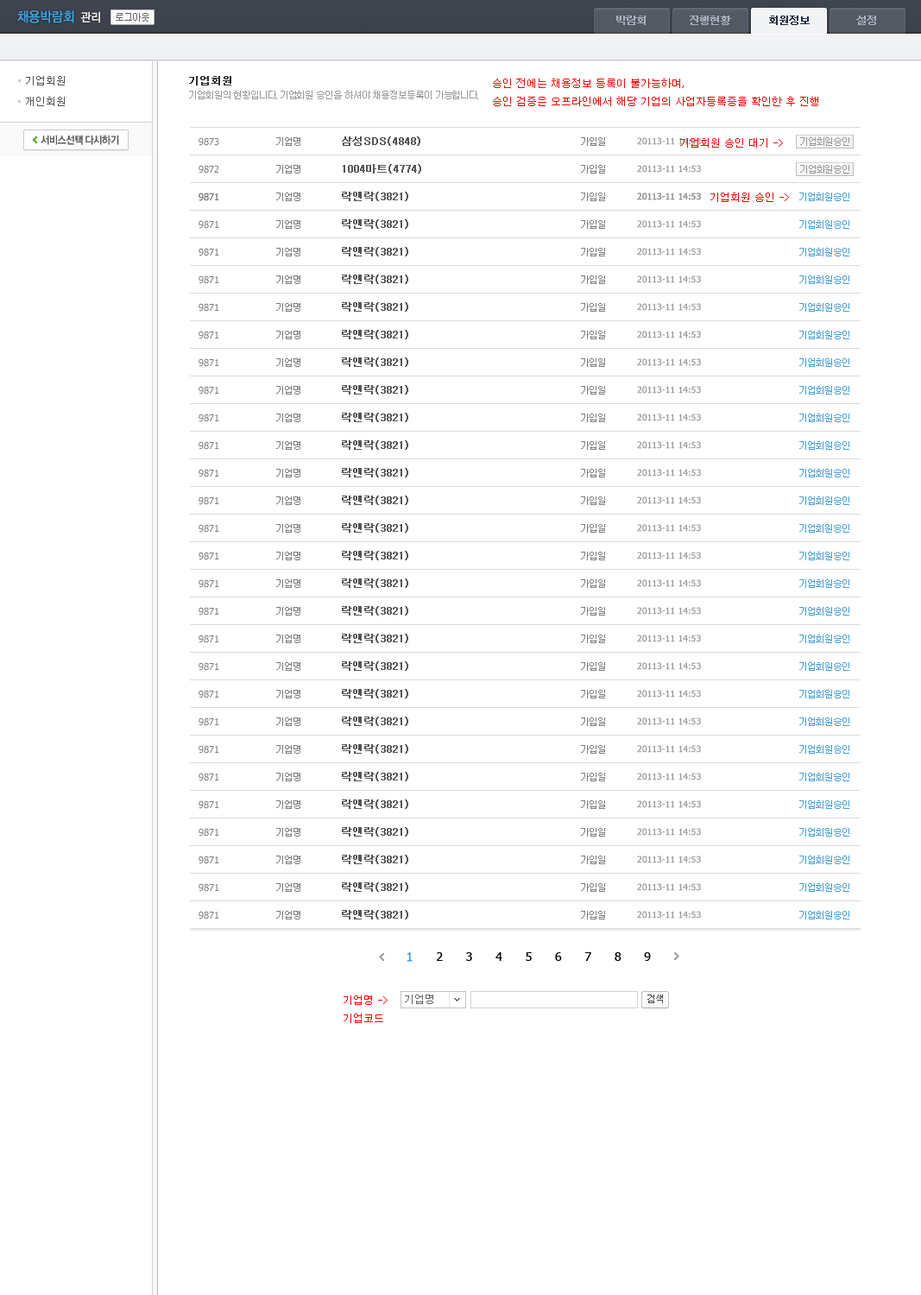
<style>
.page{position:relative;width:921px;height:1295px;background:#ffffff}
.page>*{position:absolute;margin:0}
.t1{font:13.8px "YDIYGO130-KSCpc-EUC-H";letter-spacing:-0.1em;color:#469fd9;font-weight:bold;scale:0.9 1}
.t2{font:12.1px "YDIYGO130-KSCpc-EUC-H";letter-spacing:-0.1em;color:#f0f0f0;font-weight:bold;scale:0.9 1}
.t3{font:10.4px "Dotum";letter-spacing:-0.1em;color:#aab1be;font-weight:bold}
.t4{font:10.4px "Dotum";letter-spacing:-0.1em;color:#212e40;font-weight:bold}
.t5{font:10.4px/20.7px "Dotum";color:#535353}
.t6{font:10.4px "Dotum";color:#2e2e2e;font-weight:bold}
.t7{font:10.4px "Dotum";color:#ff0000}
.t8{font:9.5px "Dotum";letter-spacing:-0.1em;color:#999999}
.t9{font:9.5px "Tahoma";color:#7d7d7d}
.t10{font:9.5px "Dotum";letter-spacing:-0.1em;color:#7d7d7d}
.t11{font:10.4px "Dotum";color:#555555;font-weight:bold}
.t12{font:8.6px "Tahoma";color:#999999;font-weight:bold}
.t13{font:9.5px "Dotum";letter-spacing:-0.1em;color:#469fd9}
.t14{font:12.1px "Tahoma";letter-spacing:0.8em;color:#000000}
.t15{font:12.1px "Tahoma";letter-spacing:0.8em;color:#469ed9;font-weight:bold}
.t16{font:10.4px "Dotum";color:#666666}
</style>
<div class="page">
<p class="t1" style="left:17px;top:10px;width:57px;height:13px">채용박람회</p>
<p class="t2" style="left:80px;top:11px;width:20px;height:12px">관리</p>
<p class="t3" style="left:616px;top:16px;width:30px;height:9px">박람회</p>
<p class="t3" style="left:690px;top:16px;width:41px;height:9px">진행현황</p>
<p class="t4" style="left:769px;top:16px;width:41px;height:9px">회원정보</p>
<p class="t3" style="left:856px;top:16px;width:20px;height:9px">설정</p>
<p class="t5" style="left:26px;top:76px;width:39px;height:30px">기업회원<br>개인회원</p>
<p class="t6" style="left:189px;top:76px;width:42px;height:9px">기업회원</p>
<p class="t7" style="left:493px;top:79px;width:325px;height:27px">승인 전에는 채용정보 등록이 불가능하며,<br>승인 검증은 오프라인에서 해당 기업의 사업자등록증을 확인한 후 진행</p>
<p class="t8" style="left:189px;top:91px;width:289px;height:8px">기업회원의 현황입니다. 기업회원 승인을 하셔야 채용정보등록이 가능합니다.</p>
<p class="t9" style="left:199px;top:137px;width:20px;height:9px">9873</p>
<p class="t10" style="left:276px;top:137px;width:24px;height:9px">기업명</p>
<p class="t11" style="left:342px;top:136px;width:78px;height:10px">삼성SDS(4848)</p>
<p class="t10" style="left:581px;top:137px;width:24px;height:9px">가입일</p>
<p class="t12" style="left:637px;top:137px;width:64px;height:8px">20113-11 14:53</p>
<p class="t7" style="left:680px;top:138px;width:103px;height:10px">기업회원 승인 대기 -&gt;</p>
<p class="t9" style="left:199px;top:165px;width:20px;height:8px">9872</p>
<p class="t10" style="left:276px;top:165px;width:24px;height:8px">기업명</p>
<p class="t11" style="left:343px;top:164px;width:78px;height:9px">1004마트(4774)</p>
<p class="t10" style="left:581px;top:165px;width:24px;height:8px">가입일</p>
<p class="t12" style="left:637px;top:165px;width:64px;height:8px">20113-11 14:53</p>
<p class="t9" style="left:199px;top:192px;width:20px;height:9px">9871</p>
<p class="t10" style="left:276px;top:192px;width:24px;height:9px">기업명</p>
<p class="t11" style="left:342px;top:192px;width:66px;height:9px">락앤락(3821)</p>
<p class="t10" style="left:581px;top:192px;width:24px;height:9px">가입일</p>
<p class="t12" style="left:637px;top:192px;width:64px;height:8px">20113-11 14:53</p>
<p class="t7" style="left:710px;top:192px;width:79px;height:10px">기업회원 승인 -&gt;</p>
<p class="t13" style="left:799px;top:192px;width:50px;height:9px">기업회원승인</p>
<p class="t14" style="left:407px;top:952px;width:244px;height:10px"><span class="t15">1</span> 2 3 4 5 6 7 8 9</p>
<p class="t7" style="left:344px;top:995px;width:44px;height:28px">기업명 -&gt;<br>기업코드</p>
<p class="t16" style="left:405px;top:994px;width:28px;height:10px">기업명</p>
</div>
